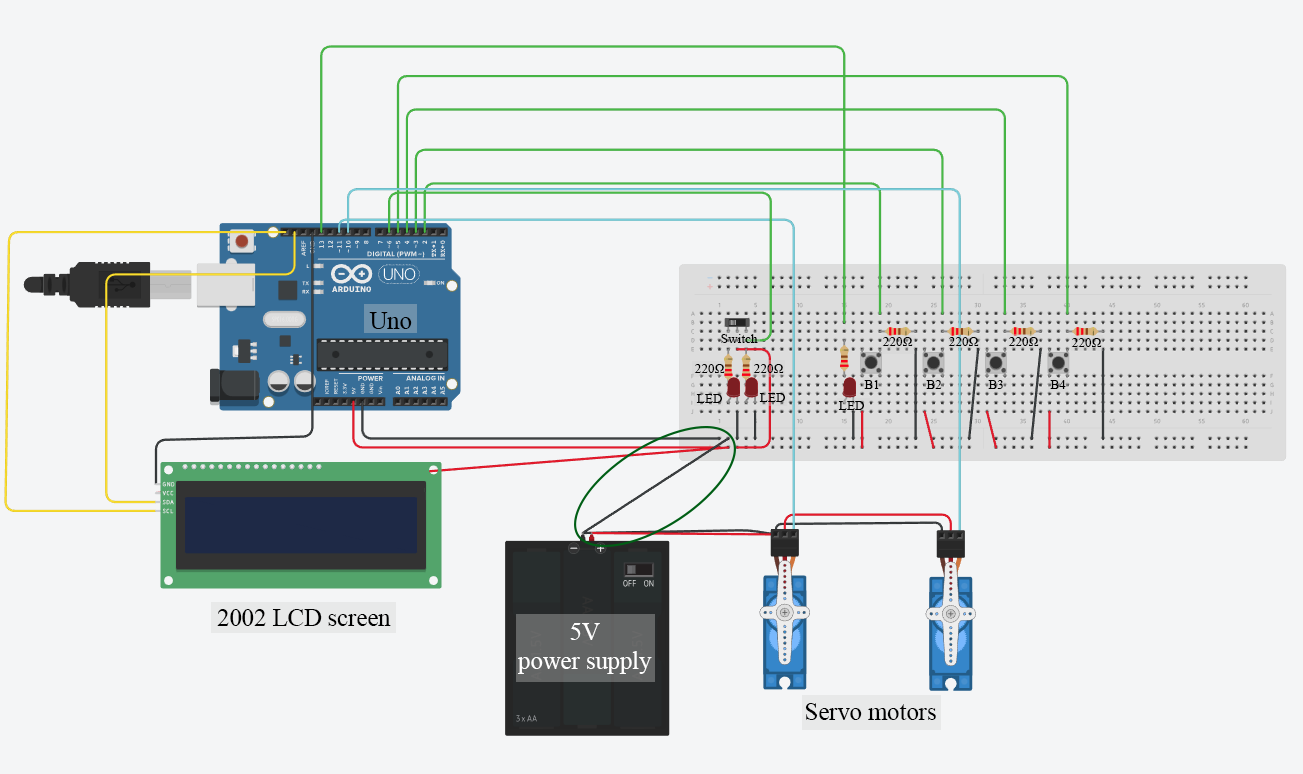
<style>
.page{position:relative;width:1303px;height:774px;background:#f4f5f6}
.page>*{position:absolute;margin:0}
.t1{font:24.6px "TimesNewRomanPSMT";color:#000000}
.t2{font:13.3px "TimesNewRomanPSMT";color:#000000}
.t3{font:24.6px "TimesNewRomanPSMT";color:#ffffff}
</style>
<div class="page">
<p class="t1" style="left:369px;top:312px;width:43px;height:17px">Uno</p>
<p class="t2" style="left:721px;top:334px;width:37px;height:9px">Switch</p>
<p class="t2" style="left:882px;top:337px;width:31px;height:9px">220Ω</p>
<p class="t2" style="left:948px;top:337px;width:31px;height:9px">220Ω</p>
<p class="t2" style="left:1008px;top:337px;width:31px;height:9px">220Ω</p>
<p class="t2" style="left:1071px;top:338px;width:31px;height:9px">220Ω</p>
<p class="t2" style="left:694px;top:364px;width:31px;height:9px">220Ω</p>
<p class="t2" style="left:753px;top:364px;width:31px;height:9px">220Ω</p>
<p class="t2" style="left:864px;top:380px;width:15px;height:9px">B1</p>
<p class="t2" style="left:926px;top:380px;width:16px;height:9px">B2</p>
<p class="t2" style="left:988px;top:380px;width:15px;height:9px">B3</p>
<p class="t2" style="left:1050px;top:380px;width:16px;height:9px">B4</p>
<p class="t2" style="left:696px;top:394px;width:26px;height:9px">LED</p>
<p class="t2" style="left:759px;top:393px;width:26px;height:9px">LED</p>
<p class="t2" style="left:838px;top:401px;width:26px;height:9px">LED</p>
<p class="t1" style="left:217px;top:609px;width:174px;height:17px">2002 LCD screen</p>
<p class="t3" style="left:518px;top:623px;width:134px;height:51px;text-align:center">5V <br>power supply</p>
<p class="t1" style="left:805px;top:703px;width:131px;height:17px">Servo motors</p>
</div>
